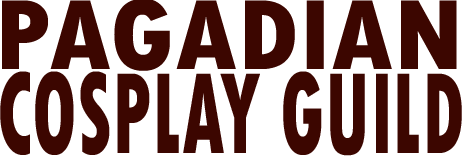
<style>
.page{position:relative;width:463px;height:156px;background:#3c0600}
.page>*{position:absolute;margin:0}
.t1{font:105.1px "TwCenMT-CondensedExtraBold";color:#3c0600;scale:1.1 1}
.t2{font:121.5px "TwCenMT-CondensedExtraBold";color:#3c0600;scale:0.66 1}
</style>
<div class="page">
<p class="t1" style="left:2px;top:0px;width:455px;height:71px">PAGADIAN</p>
<p class="t2" style="left:0px;top:71px;width:462px;height:85px">COSPLAY GUILD</p>
</div>
